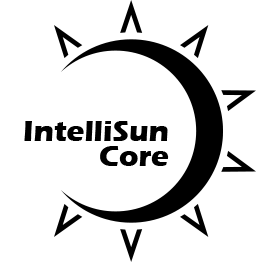
<style>
.page{position:relative;width:262px;height:262px;background:#ffffff}
.page>*{position:absolute;margin:0}
.t1{font:30px/25px "ErasITC-Bold";color:#000000}
</style>
<div class="page">
<p class="t1" style="left:24px;top:121px;width:145px;height:45px;text-align:right">IntelliSun<br>Core</p>
</div>
